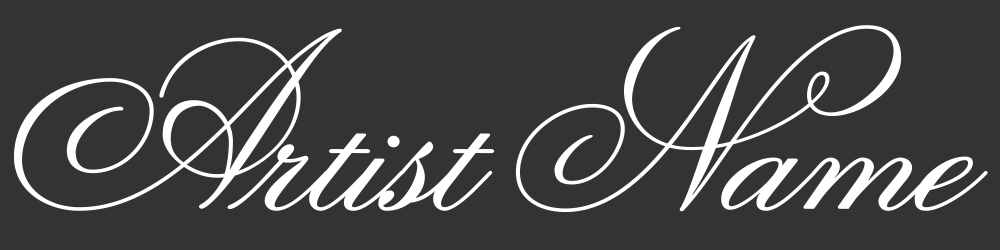
<style>
.page{position:relative;width:1000px;height:250px;background:#333333}
.page>*{position:absolute;margin:0}
.t1{font:250.8px "SweetFancyScript";color:#ffffff}
</style>
<div class="page">
<p class="t1" style="left:13px;top:25px;width:975px;height:188px">Artist Name</p>
</div>
